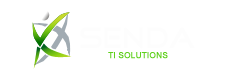
<style>
.page{position:relative;width:250px;height:75px;background:#ffffff}
.page>*{position:absolute;margin:0}
.t1{font:8.4px "ArialMT";letter-spacing:-0.01em;color:#5fd01d;text-transform:uppercase;font-weight:bold}
</style>
<div class="page">
<p class="t1" style="left:108px;top:52px;width:60px;height:7px">TI SOLUTIONS</p>
</div>
